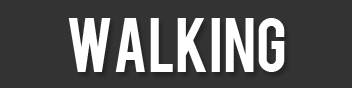
<style>
.page{position:relative;width:352px;height:88px;background:#333333}
.page>*{position:absolute;margin:0}
.t1{font:60px "Bebas";color:#ffffff}
</style>
<div class="page">
<p class="t1" style="left:68px;top:18px;width:217px;height:54px">WALKing</p>
</div>
